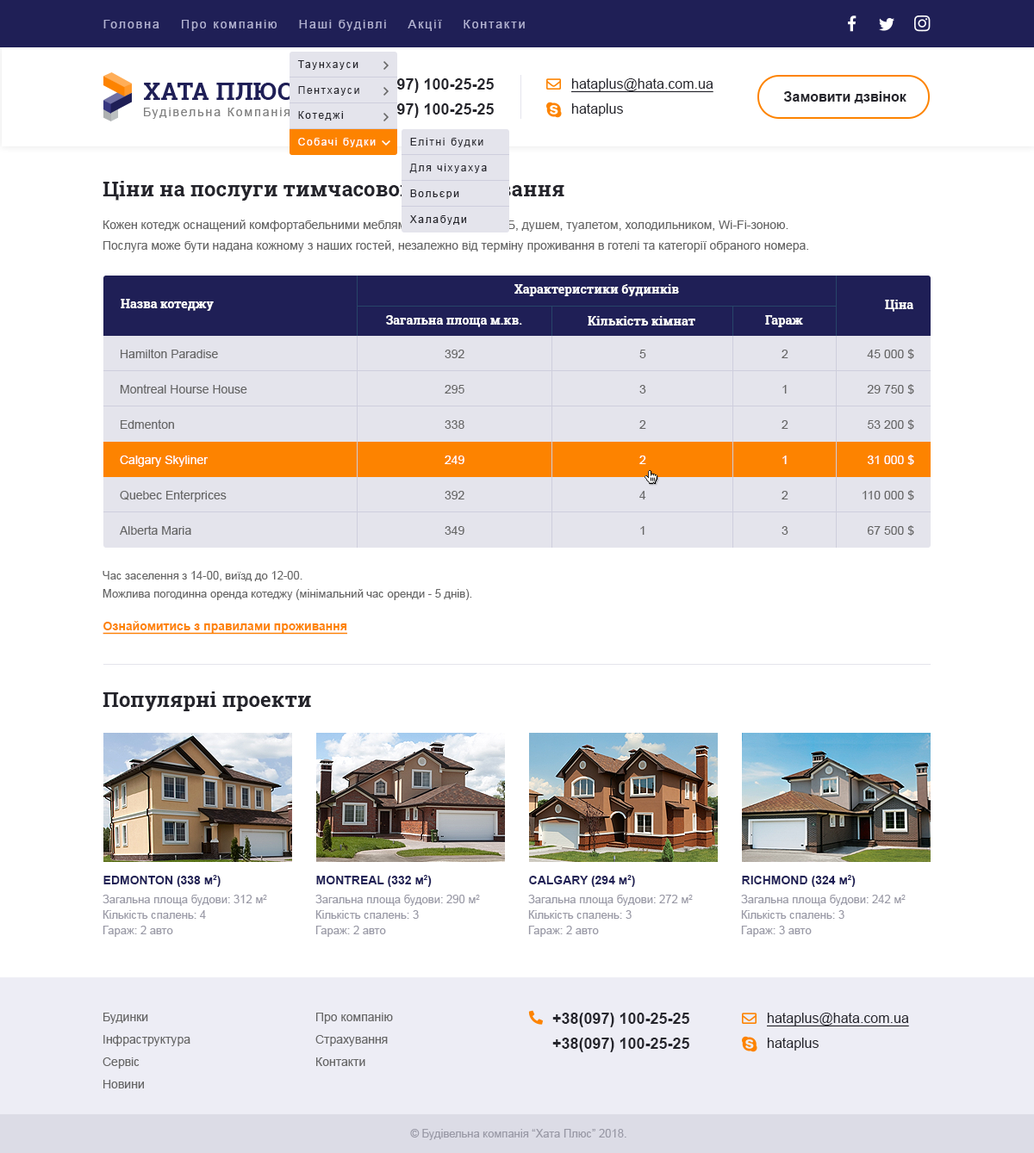
<style>
.page{position:relative;width:1034px;height:1153px;background:#ffffff}
.page>*{position:absolute;margin:0}
.t1{font:12.1px "ArialMT";letter-spacing:0.14em;color:#b1b1d2}
.t2{font:10.3px "ArialMT";letter-spacing:0.14em;color:#25252c}
.t3{font:15.5px "Arial-BoldMT";color:#25252c}
.t4{font:13.8px "ArialMT";color:#25252c;text-decoration:underline}
.t5{font:13.8px "Arial-BoldMT";color:#25252c}
.t6{font:13.8px "ArialMT";color:#25252c}
.t7{font:10.3px "ArialMT";letter-spacing:0.14em;color:#ffffff}
.t8{font:20.7px "RobotoSlab-Bold";color:#24242b}
.t9{font:12.1px/20.7px "ArialMT";color:#666666}
.t10{font:12.1px "RobotoSlab-Bold";color:#ffffff}
.t11{font:12.1px "ArialMT";color:#666666}
.t12{font:12.1px "ArialMT";color:#ffffff}
.t13{font:11.2px/18.1px "ArialMT";color:#666666}
.t14{font:12.1px "Arial-BoldMT";color:#fd8300;text-decoration:underline}
.t15{font:12.1px "Arial-BoldMT";color:#1f1f56}
.t16{font:11.2px/15.5px "ArialMT";color:#9999a6}
.t17{font:12.1px/22.4px "ArialMT";color:#666666}
.t18{font:11.2px "ArialMT";color:#9999a6}
</style>
<div class="page">
<p class="t1" style="left:103px;top:20px;width:422px;height:11px">Головна    Про компанію    Наші будівлі    Акції    Контакти</p>
<p class="t2" style="left:297px;top:60px;width:61px;height:10px">Таунхауси</p>
<p class="t2" style="left:298px;top:86px;width:61px;height:10px">Пентхауси</p>
<p class="t3" style="left:357px;top:78px;width:137px;height:15px">+38(097) 100-25-25</p>
<p class="t4" style="left:571px;top:78px;width:142px;height:15px">hataplus@hata.com.ua</p>
<p class="t5" style="left:783px;top:91px;width:123px;height:12px">Замовити дзвінок</p>
<p class="t2" style="left:298px;top:111px;width:45px;height:10px">Котеджі</p>
<p class="t3" style="left:357px;top:103px;width:137px;height:15px">+38(097) 100-25-25</p>
<p class="t6" style="left:571px;top:103px;width:52px;height:13px">hataplus</p>
<p class="t7" style="left:298px;top:138px;width:78px;height:9px">Собачі будки</p>
<p class="t2" style="left:410px;top:138px;width:73px;height:9px">Елітні будки</p>
<p class="t2" style="left:409px;top:164px;width:78px;height:9px">Для чіхуахуа</p>
<p class="t8" style="left:103px;top:181px;width:461px;height:20px">Ціни на послуги тимчасового проживання</p>
<p class="t2" style="left:410px;top:190px;width:49px;height:9px">Вольєри</p>
<p class="t9" style="left:103px;top:220px;width:705px;height:32px">Кожен котедж оснащений комфортабельними меблями, супутниковим ТБ, душем, туалетом, холодильником, Wi-Fi-зоною. <br>Послуга може бути надана кожному з наших гостей, незалежно від терміну проживання в готелі та категорії обраного номера.</p>
<p class="t2" style="left:409px;top:215px;width:57px;height:10px">Халабуди</p>
<p class="t10" style="left:514px;top:284px;width:165px;height:12px">Характеристики будинків</p>
<p class="t10" style="left:121px;top:299px;width:93px;height:12px">Назва котеджу</p>
<p class="t10" style="left:885px;top:300px;width:28px;height:12px">Ціна</p>
<p class="t10" style="left:386px;top:315px;width:136px;height:12px">Загальна площа м.кв.</p>
<p class="t10" style="left:588px;top:316px;width:107px;height:10px">Кількість кімнат</p>
<p class="t10" style="left:765px;top:315px;width:38px;height:12px">Гараж</p>
<p class="t11" style="left:121px;top:349px;width:97px;height:9px">Hamilton Paradise</p>
<p class="t11" style="left:445px;top:350px;width:19px;height:8px">392</p>
<p class="t11" style="left:639px;top:350px;width:7px;height:8px">5</p>
<p class="t11" style="left:781px;top:350px;width:7px;height:8px">2</p>
<p class="t11" style="left:867px;top:349px;width:47px;height:10px">45 000 $</p>
<p class="t11" style="left:120px;top:384px;width:127px;height:10px">Montreal Hourse House</p>
<p class="t11" style="left:445px;top:385px;width:19px;height:9px">295</p>
<p class="t11" style="left:639px;top:385px;width:7px;height:9px">3</p>
<p class="t11" style="left:782px;top:385px;width:5px;height:9px">1</p>
<p class="t11" style="left:867px;top:384px;width:47px;height:11px">29 750 $</p>
<p class="t11" style="left:121px;top:420px;width:53px;height:9px">Edmenton</p>
<p class="t11" style="left:445px;top:420px;width:19px;height:9px">338</p>
<p class="t11" style="left:639px;top:420px;width:7px;height:9px">2</p>
<p class="t11" style="left:781px;top:420px;width:7px;height:9px">2</p>
<p class="t11" style="left:867px;top:420px;width:47px;height:10px">53 200 $</p>
<p class="t12" style="left:120px;top:456px;width:88px;height:11px">Calgary Skyliner</p>
<p class="t12" style="left:445px;top:456px;width:19px;height:8px">249</p>
<p class="t12" style="left:639px;top:456px;width:7px;height:8px">2</p>
<p class="t12" style="left:782px;top:456px;width:5px;height:8px">1</p>
<p class="t12" style="left:867px;top:455px;width:47px;height:10px">31 000 $</p>
<p class="t11" style="left:120px;top:490px;width:107px;height:12px">Quebec Enterprices</p>
<p class="t11" style="left:445px;top:491px;width:19px;height:9px">392</p>
<p class="t11" style="left:639px;top:491px;width:7px;height:9px">4</p>
<p class="t11" style="left:781px;top:491px;width:7px;height:9px">2</p>
<p class="t11" style="left:862px;top:490px;width:52px;height:11px">110 000 $</p>
<p class="t11" style="left:120px;top:525px;width:71px;height:10px">Alberta Maria</p>
<p class="t11" style="left:445px;top:526px;width:19px;height:9px">349</p>
<p class="t11" style="left:640px;top:526px;width:4px;height:9px">1</p>
<p class="t11" style="left:781px;top:526px;width:7px;height:9px">3</p>
<p class="t11" style="left:867px;top:525px;width:47px;height:11px">67 500 $</p>
<p class="t13" style="left:103px;top:571px;width:369px;height:29px">Час заселення з 14-00, виїзд до 12-00.<br>Можлива погодинна оренда котеджу (мінімальний час оренди - 5 днів).</p>
<p class="t14" style="left:103px;top:621px;width:244px;height:14px">Ознайомитись з правилами проживання</p>
<p class="t8" style="left:103px;top:692px;width:208px;height:20px">Популярні проекти</p>
<p class="t15" style="left:103px;top:875px;width:118px;height:12px">EDMONTON (338 м2)</p>
<p class="t15" style="left:316px;top:875px;width:116px;height:12px">MONTREAL (332 м2)</p>
<p class="t15" style="left:529px;top:875px;width:106px;height:12px">CALGARY (294 м2)</p>
<p class="t15" style="left:742px;top:875px;width:113px;height:12px">RICHMOND (324 м2)</p>
<p class="t16" style="left:103px;top:895px;width:164px;height:42px">Загальна площа будови: 312 м2<br>Кількість спалень: 4<br>Гараж: 2 авто</p>
<p class="t16" style="left:315px;top:895px;width:165px;height:42px">Загальна площа будови: 290 м2<br>Кількість спалень: 3<br>Гараж: 2 авто</p>
<p class="t16" style="left:528px;top:895px;width:165px;height:42px">Загальна площа будови: 272 м2<br>Кількість спалень: 3<br>Гараж: 2 авто</p>
<p class="t16" style="left:741px;top:895px;width:164px;height:42px">Загальна площа будови: 242 м2<br>Кількість спалень: 3<br>Гараж: 3 авто</p>
<p class="t17" style="left:103px;top:1013px;width:87px;height:76px">Будинки<br>Інфраструктура<br>Сервіс<br>Новини</p>
<p class="t17" style="left:315px;top:1013px;width:78px;height:53px">Про компанію<br>Страхування<br>Контакти</p>
<p class="t3" style="left:552px;top:1013px;width:137px;height:15px">+38(097) 100-25-25</p>
<p class="t4" style="left:767px;top:1013px;width:142px;height:15px">hataplus@hata.com.ua</p>
<p class="t3" style="left:552px;top:1038px;width:137px;height:15px">+38(097) 100-25-25</p>
<p class="t6" style="left:767px;top:1038px;width:51px;height:13px">hataplus</p>
<p class="t18" style="left:410px;top:1129px;width:216px;height:12px">© Будівельна компанія “Хата Плюс” 2018.</p>
</div>
